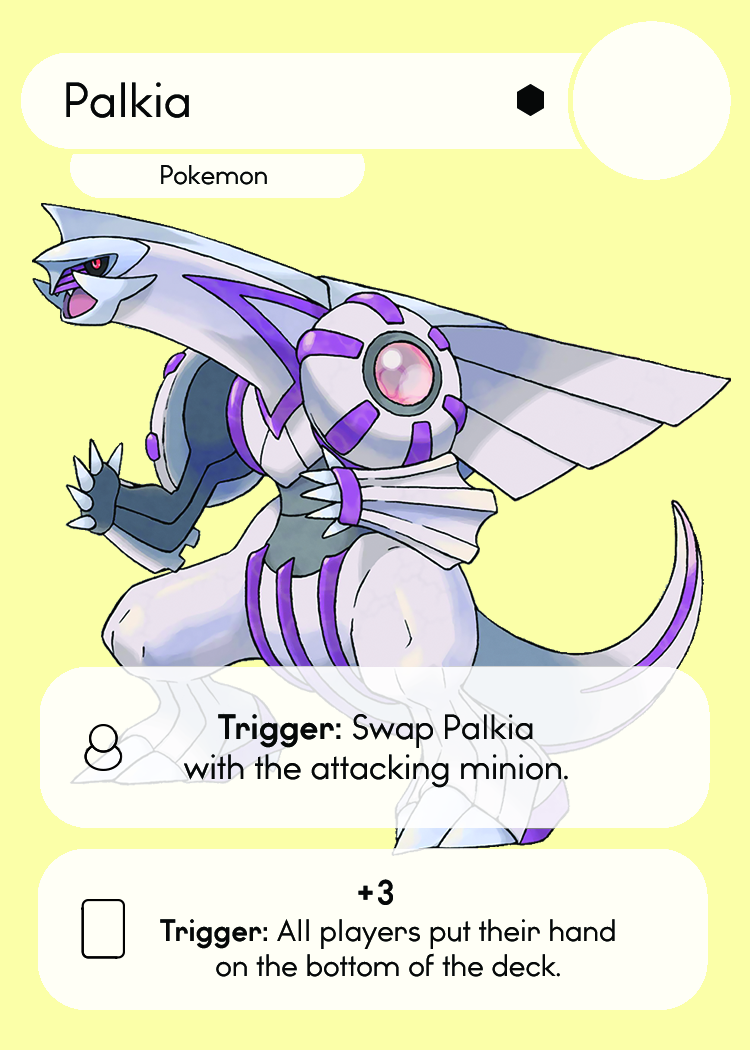
<style>
.page{position:relative;width:750px;height:1050px;background:#fbffa8}
.page>*{position:absolute;margin:0}
.t1{font:46.7px "WatchwordRegularDemo";color:#060808}
.t2{font:25.5px "WatchwordRegularDemo";color:#060808}
.t3{font:33.3px "WatchwordRegularDemo";color:#060808}
.t4{font:33.3px "WatchwordBoldDemo";color:#060808}
.t5{font:33.3px "Dosis-Medium";color:#060808}
.t6{font:32.7px "WatchwordBoldDemo";color:#060808}
.t7{font:29.2px "WatchwordRegularDemo";color:#060808}
.t8{font:29.2px "WatchwordBoldDemo";color:#060808}
.t9{font:29.2px "Dosis-Medium";color:#060808}
</style>
<div class="page">
<p class="t1" style="left:66px;top:82px;width:123px;height:36px">Palkia</p>
<p class="t2" style="left:161px;top:165px;width:106px;height:20px">Pokemon</p>
<p class="t3" style="left:184px;top:714px;width:384px;height:74px;text-align:center"><span class="t4">Trigger: </span>Swap Palkia<br>with the attacking minion<span class="t5">.</span></p>
<p class="t6" style="left:358px;top:879px;width:35px;height:26px">+3</p>
<p class="t7" style="left:160px;top:919px;width:455px;height:58px;text-align:center"><span class="t8">Trigger: </span>All players put their hand<br>on the bottom of the deck<span class="t9">.</span></p>
</div>
